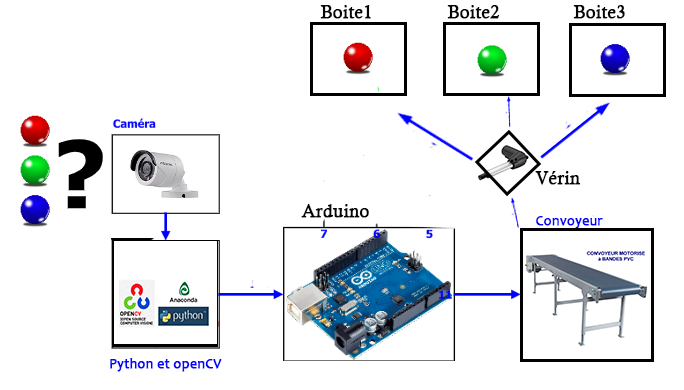
<style>
.page{position:relative;width:684px;height:390px;background:#ffffff}
.page>*{position:absolute;margin:0}
.t1{font:18px "CalistoMT";color:#050505;font-weight:bold}
.t2{font:14px "Candara";color:#0505fa;font-weight:bold}
</style>
<div class="page">
<p class="t1" style="left:320px;top:5px;width:51px;height:14px">Boite1</p>
<p class="t1" style="left:447px;top:5px;width:53px;height:14px">Boite2</p>
<p class="t1" style="left:573px;top:5px;width:52px;height:14px">Boite3</p>
<p class="t1" style="left:535px;top:171px;width:46px;height:14px">Vérin</p>
<p class="t1" style="left:301px;top:204px;width:68px;height:14px">Arduino</p>
<p class="t2" style="left:536px;top:216px;width:67px;height:13px">Convoyeur</p>
<p class="t2" style="left:110px;top:358px;width:112px;height:14px">Python et openCV</p>
</div>
